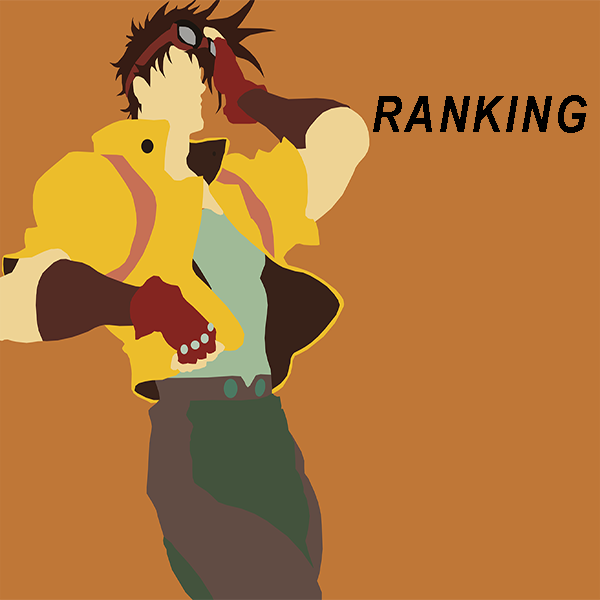
<style>
.page{position:relative;width:600px;height:600px;background:#bf7737}
.page>*{position:absolute;margin:0}
.t1{font:50px "ArialNarrow-BoldItalic";letter-spacing:0.08em;color:#000000;text-transform:uppercase}
</style>
<div class="page">
<p class="t1" style="left:373px;top:95px;width:214px;height:38px">ranking</p>
</div>
